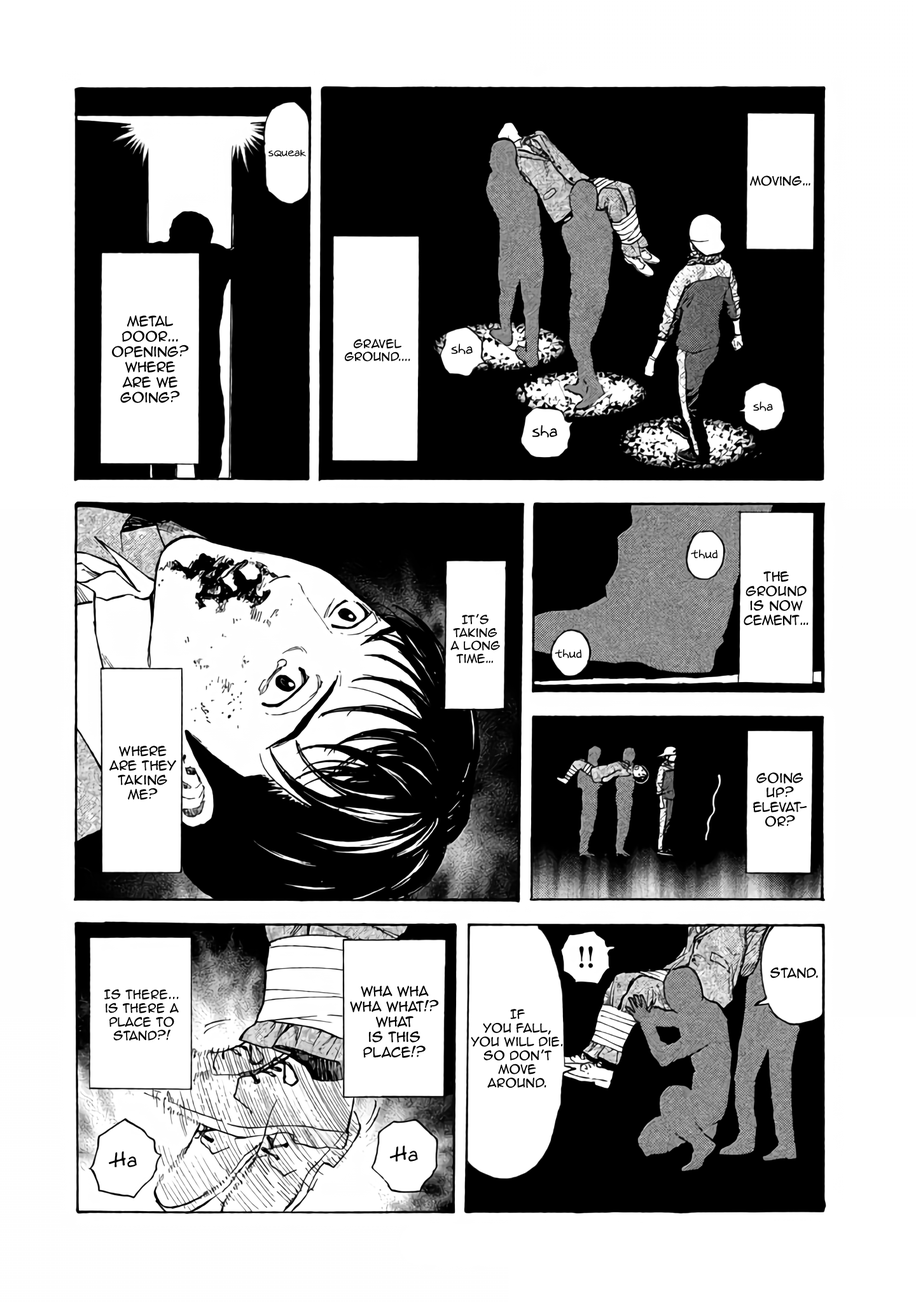
<style>
.page{position:relative;width:916px;height:1302px;background:#ffffff}
.page>*{position:absolute;margin:0}
.t1{font:10.8px "Augie";color:#000000}
.t2{font:11.4px "AnimeAce2.0BB";color:#000000}
.t3{font:12.7px "AnimeAce2.0BB";color:#000000}
.t4{font:10.8px "AnimeAce2.0BB";color:#000000}
.t5{font:14px "Augie";color:#000000}
.t6{font:12.7px "Augie";color:#000000}
.t7{font:16.5px "Augie";color:#000000}
.t8{font:12.1px "Augie";color:#000000}
.t9{font:12.1px "AnimeAce2.0BB";color:#000000}
.t10{font:20.3px "Augie";color:#000000}
</style>
<div class="page">
<p class="t1" style="left:268px;top:149px;width:38px;height:8px">squeak</p>
<p class="t2" style="left:750px;top:176px;width:60px;height:10px">Moving…</p>
<p class="t3" style="left:112px;top:315px;width:77px;height:88px;text-align:center">Metal door... opening? Where <br>are we going?</p>
<p class="t4" style="left:345px;top:339px;width:65px;height:23px;text-align:center">Gravel<br>ground....</p>
<p class="t5" style="left:451px;top:343px;width:21px;height:11px">sha</p>
<p class="t6" style="left:753px;top:401px;width:20px;height:10px">sha</p>
<p class="t7" style="left:532px;top:425px;width:25px;height:12px">sha</p>
<p class="t8" style="left:691px;top:549px;width:26px;height:10px">thud</p>
<p class="t9" style="left:743px;top:571px;width:65px;height:55px;text-align:center">The ground is now cement…</p>
<p class="t4" style="left:450px;top:614px;width:50px;height:50px;text-align:center">It’s taking<br>a long time…</p>
<p class="t8" style="left:554px;top:649px;width:27px;height:10px">thud</p>
<p class="t9" style="left:109px;top:746px;width:67px;height:54px;text-align:center">Where are they taking me?</p>
<p class="t9" style="left:753px;top:773px;width:54px;height:54px;text-align:center">Going up? Elevat-or?</p>
<p class="t9" style="left:770px;top:967px;width:48px;height:12px">Stand.</p>
<p class="t2" style="left:104px;top:989px;width:75px;height:52px;text-align:center">Is there...<br>is there a place to stand?!</p>
<p class="t3" style="left:350px;top:986px;width:89px;height:72px;text-align:center">Wha Wha wha what!? What <br>is this place!?</p>
<p class="t2" style="left:471px;top:1009px;width:92px;height:80px;text-align:center">If <br>you fall, you will die.<br>so Don’t Move around.</p>
<p class="t10" style="left:390px;top:1146px;width:28px;height:16px">Ha</p>
<p class="t10" style="left:109px;top:1152px;width:28px;height:15px">Ha</p>
</div>
